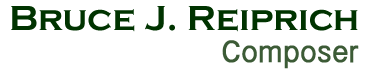
<style>
.page{position:relative;width:388px;height:74px;background:#ffffff}
.page>*{position:absolute;margin:0}
.t1{font:36px "CopperplateGothic-Bold";letter-spacing:0.002em;color:#003300}
.t2{font:32px "InaiMathi";letter-spacing:0.002em;color:#3c5b36;font-weight:bold}
</style>
<div class="page">
<p class="t1" style="left:11px;top:6px;width:347px;height:26px">Bruce J. Reiprich</p>
<p class="t2" style="left:222px;top:40px;width:137px;height:29px">Composer</p>
</div>
